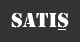
<style>
.page{position:relative;width:80px;height:42px;background:#333333}
.page>*{position:absolute;margin:0}
.t1{font:21.3px "Stencil";color:#ffffff}
</style>
<div class="page">
<p class="t1" style="left:11px;top:12px;width:58px;height:16px">Satis</p>
</div>
